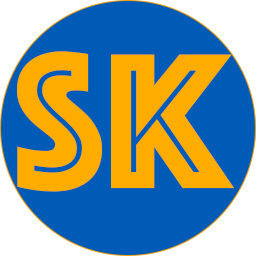
<style>
.page{position:relative;width:256px;height:256px;background:#005bb7}
.page>*{position:absolute;margin:0}
.t1{font:200px "Phosphate-Inline";color:#fead00}
</style>
<div class="page">
<p class="t1" style="left:17px;top:51px;width:217px;height:141px">SK</p>
</div>
